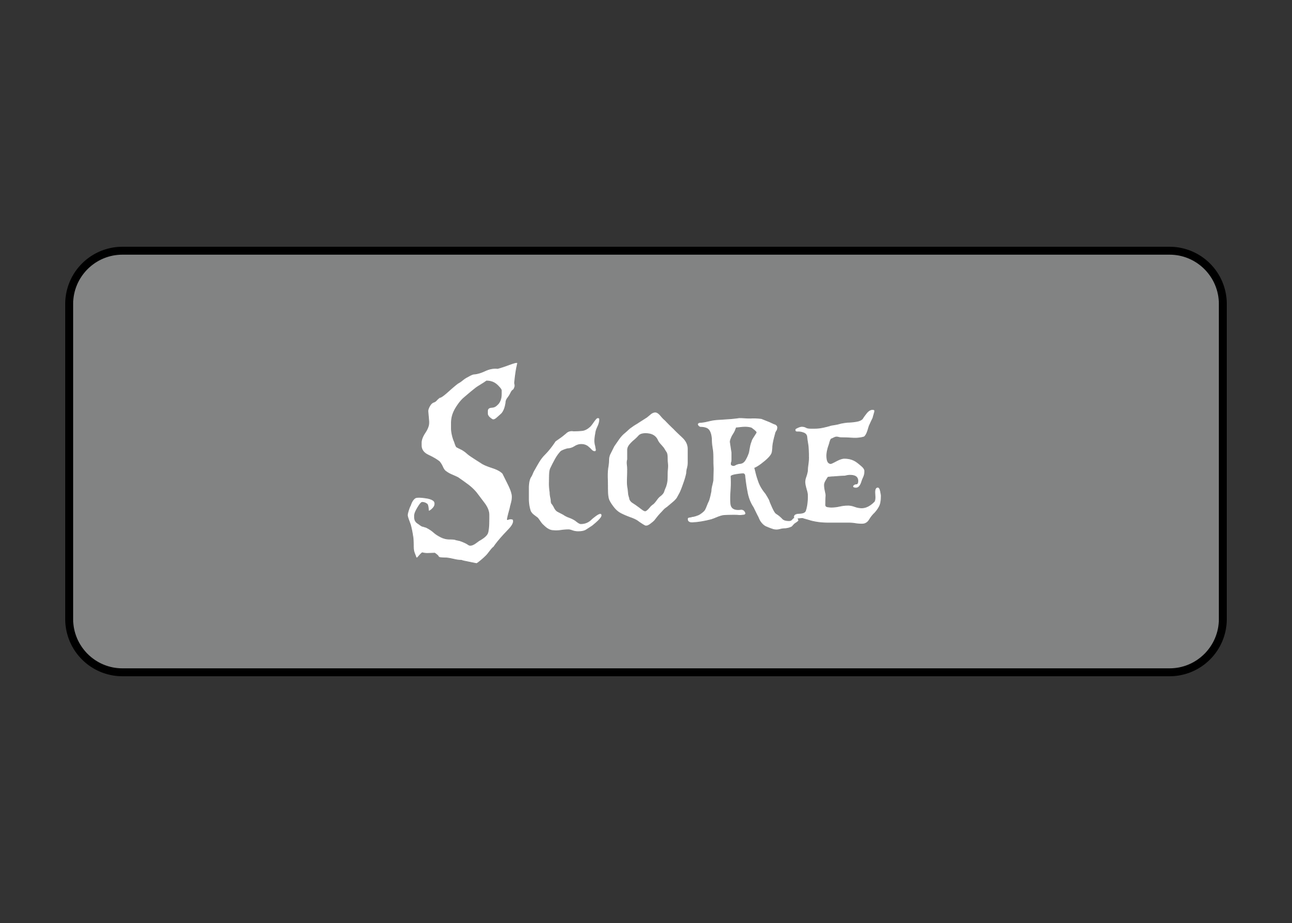
<style>
.page{position:relative;width:1292px;height:923px;background:#333333}
.page>*{position:absolute;margin:0}
.t1{font:282px "AliceinWonderland";color:#ffffff}
</style>
<div class="page">
<p class="t1" style="left:407px;top:362px;width:474px;height:202px">Score</p>
</div>
